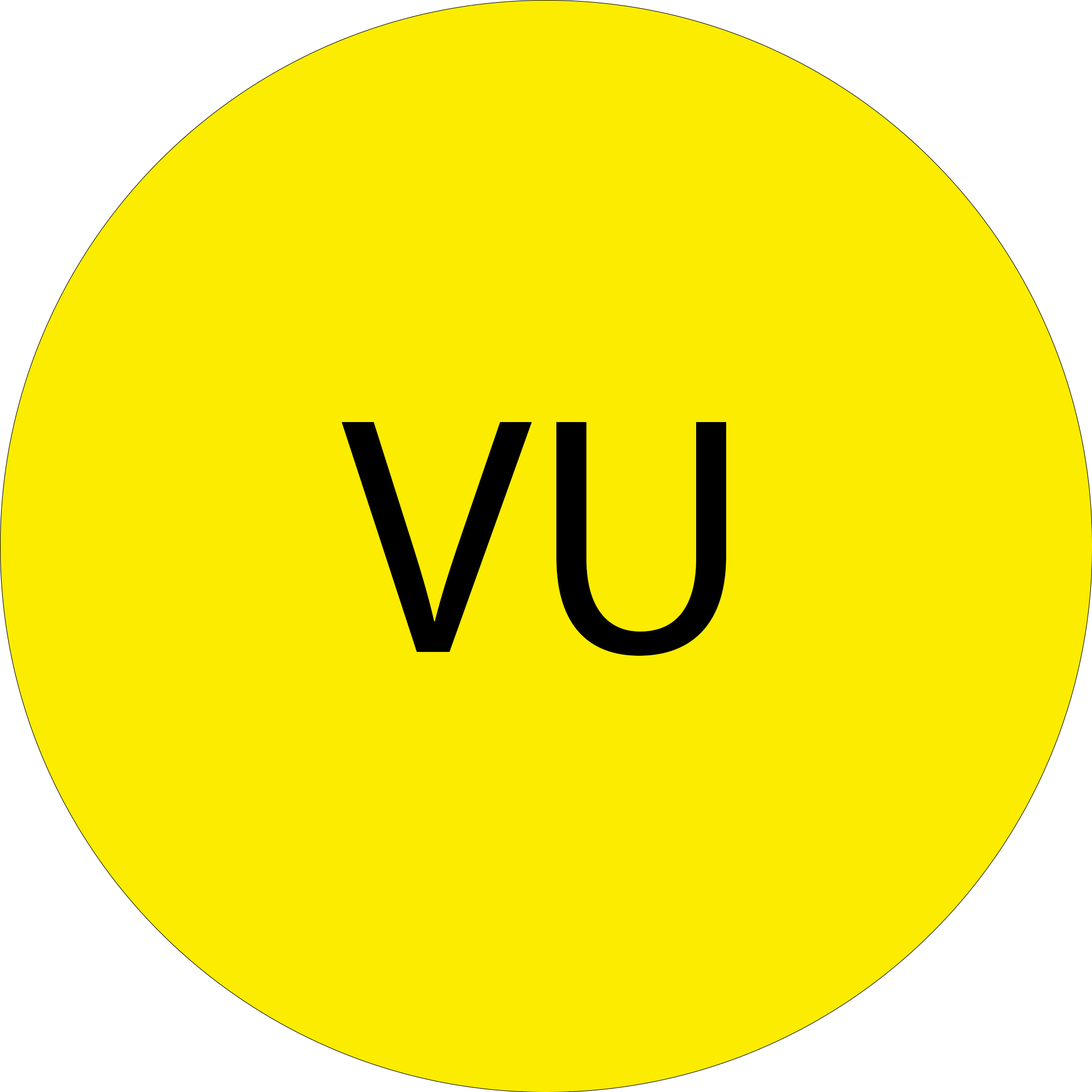
<style>
.page{position:relative;width:1092px;height:1092px;background:#fbec00}
.page>*{position:absolute;margin:0}
.t1{font:341.2px "MyriadPro-Regular";color:#000000}
</style>
<div class="page">
<p class="t1" style="left:341px;top:422px;width:385px;height:234px">VU</p>
</div>
